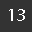
<style>
.page{position:relative;width:32px;height:32px;background:#333333}
.page>*{position:absolute;margin:0}
.t1{font:17.8px "MyriadPro-Regular";color:#ffffff;scale:1.12 1}
</style>
<div class="page">
<p class="t1" style="left:9px;top:9px;width:16px;height:12px">13</p>
</div>
